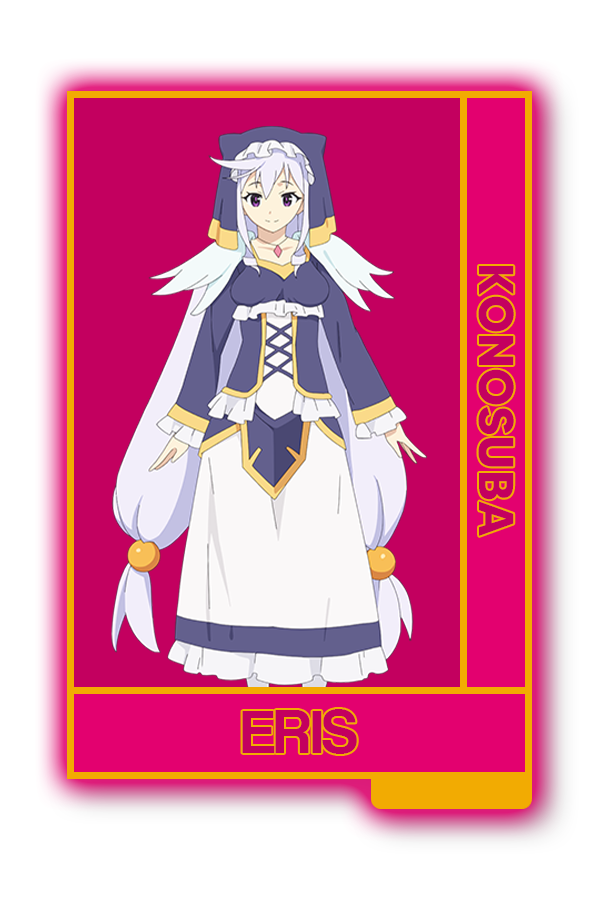
<style>
.page{position:relative;width:600px;height:900px;background:#ffffff}
.page>*{position:absolute;margin:0}
.t1{font:48.8px "MADETOMMY-Bold";color:#c3005f}
.t2{font:62.7px "CoolveticaRg-Regular";color:#c3005f}
</style>
<div class="page">
<p class="t1" style="left:478px;top:266px;width:36px;height:270px;rotate:90deg">KONOSUBA</p>
<p class="t2" style="left:242px;top:709px;width:115px;height:45px">ERIS</p>
</div>
